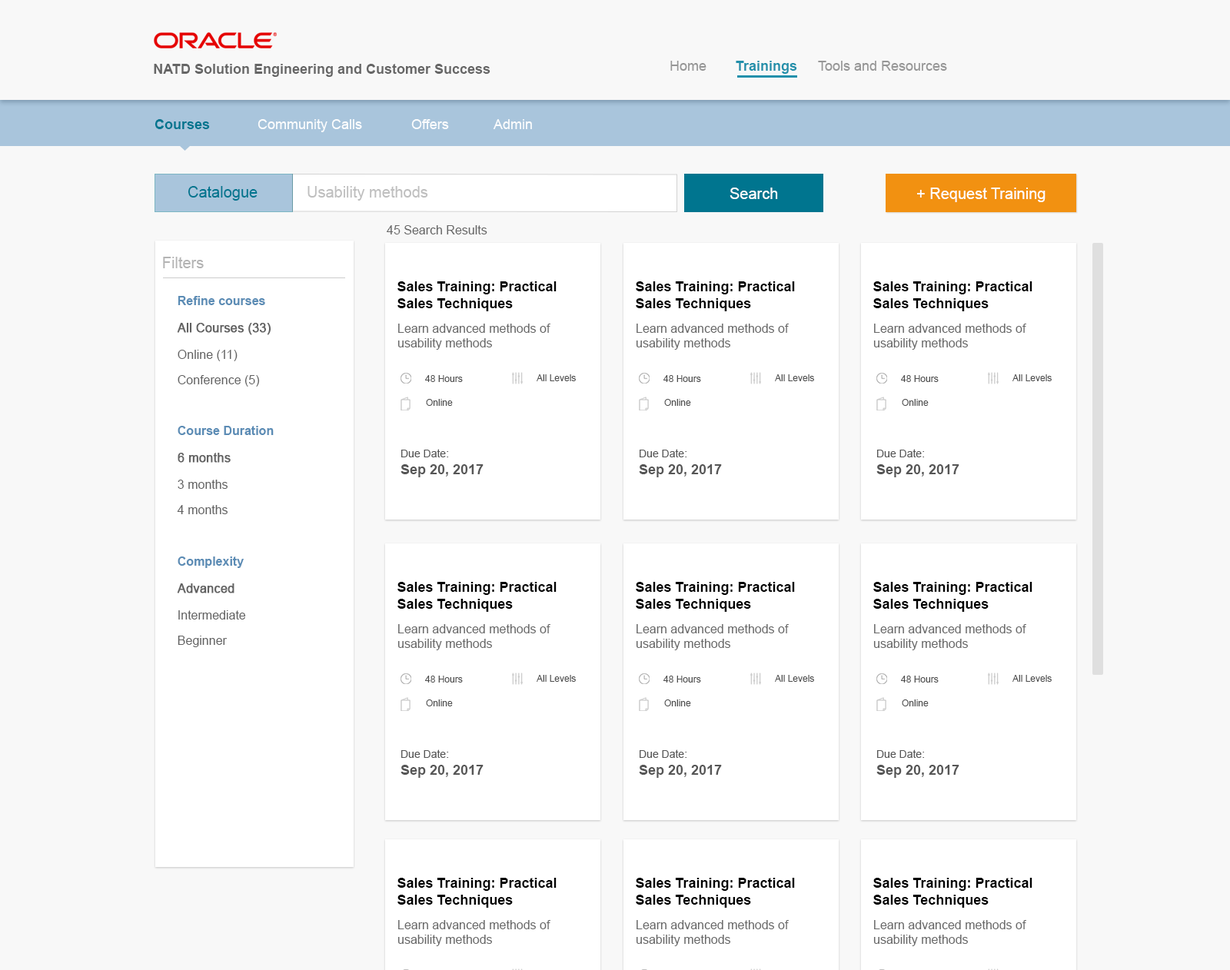
<style>
.page{position:relative;width:1230px;height:970px;background:#ffffff}
.page>*{position:absolute;margin:0}
.t1{font:13.8px "Arial-BoldMT";color:#666666}
.t2{font:13.8px "ArialMT";color:#969696}
.t3{font:13.8px "Arial-BoldMT";color:#2290ab}
.t4{font:13.8px "Arial-BoldMT";color:#00758f}
.t5{font:13.8px "ArialMT";color:#ffffff}
.t6{font:15.4px "ArialMT";color:#00758f}
.t7{font:15.4px "ArialMT";color:#bfbfbf}
.t8{font:15.4px "ArialMT";color:#ffffff}
.t9{font:12.3px "ArialMT";color:#676767}
.t10{font:15.4px "ArialMT";color:#b4b4b4}
.t11{font:13.8px "Arial-BoldMT";color:#000000}
.t12{font:12.3px "Arial-BoldMT";color:#5b8cb5}
.t13{font:12.3px "ArialMT";color:#626262;font-weight:bold}
.t14{font:12.3px "ArialMT";color:#686868}
.t15{font:12.3px "ArialMT";color:#626262}
.t16{font:9.2px "ArialMT";color:#505050}
.t17{font:13.8px "Arial-BoldMT";color:#565656}
.t18{font:10.8px "ArialMT";color:#565656}
</style>
<div class="page">
<p class="t1" style="left:154px;top:64px;width:336px;height:13px">NATD Solution Engineering and Customer Success</p>
<p class="t2" style="left:670px;top:61px;width:36px;height:10px">Home</p>
<p class="t3" style="left:735px;top:61px;width:62px;height:13px">Trainings</p>
<p class="t2" style="left:818px;top:61px;width:129px;height:10px">Tools and Resources</p>
<p class="t4" style="left:154px;top:119px;width:56px;height:10px">Courses</p>
<p class="t5" style="left:257px;top:119px;width:105px;height:13px;opacity:0.95">Community Calls</p>
<p class="t5" style="left:411px;top:119px;width:38px;height:10px;opacity:0.95">Offers</p>
<p class="t5" style="left:493px;top:119px;width:39px;height:10px;opacity:0.95">Admin</p>
<p class="t6" style="left:188px;top:186px;width:69px;height:15px">Catalogue</p>
<p class="t7" style="left:307px;top:186px;width:121px;height:15px">Usability methods</p>
<p class="t8" style="left:729px;top:188px;width:49px;height:11px">Search</p>
<p class="t8" style="left:917px;top:188px;width:128px;height:14px">+ Request Training</p>
<p class="t9" style="left:387px;top:225px;width:100px;height:9px">45 Search Results</p>
<p class="t10" style="left:163px;top:257px;width:41px;height:11px">Filters</p>
<p class="t11" style="left:397px;top:281px;width:159px;height:30px">Sales Training: Practical Sales Techniques</p>
<p class="t11" style="left:636px;top:281px;width:159px;height:30px">Sales Training: Practical Sales Techniques</p>
<p class="t11" style="left:873px;top:281px;width:159px;height:30px">Sales Training: Practical Sales Techniques</p>
<p class="t12" style="left:178px;top:296px;width:87px;height:9px">Refine courses</p>
<p class="t13" style="left:177px;top:323px;width:94px;height:12px">All Courses (33)</p>
<p class="t14" style="left:397px;top:324px;width:153px;height:26px">Learn advanced methods of<br>usability methods</p>
<p class="t14" style="left:636px;top:324px;width:152px;height:26px">Learn advanced methods of<br>usability methods</p>
<p class="t14" style="left:873px;top:324px;width:153px;height:26px">Learn advanced methods of<br>usability methods</p>
<p class="t15" style="left:178px;top:350px;width:59px;height:11px">Online (11)</p>
<p class="t15" style="left:178px;top:375px;width:82px;height:12px">Conference (5)</p>
<p class="t16" style="left:425px;top:375px;width:38px;height:7px">48 Hours</p>
<p class="t16" style="left:536px;top:374px;width:40px;height:7px">All Levels</p>
<p class="t16" style="left:663px;top:375px;width:38px;height:7px">48 Hours</p>
<p class="t16" style="left:775px;top:374px;width:39px;height:7px">All Levels</p>
<p class="t16" style="left:901px;top:375px;width:37px;height:7px">48 Hours</p>
<p class="t16" style="left:1012px;top:374px;width:39px;height:7px">All Levels</p>
<p class="t16" style="left:426px;top:399px;width:27px;height:7px">Online</p>
<p class="t16" style="left:664px;top:399px;width:27px;height:7px">Online</p>
<p class="t16" style="left:901px;top:399px;width:27px;height:7px">Online</p>
<p class="t12" style="left:178px;top:426px;width:96px;height:9px">Course Duration</p>
<p class="t17" style="left:400px;top:449px;width:83px;height:28px"><span class="t18">Due Date: <br></span>Sep 20, 2017</p>
<p class="t17" style="left:639px;top:449px;width:83px;height:28px"><span class="t18">Due Date: <br></span>Sep 20, 2017</p>
<p class="t17" style="left:876px;top:449px;width:83px;height:28px"><span class="t18">Due Date: <br></span>Sep 20, 2017</p>
<p class="t13" style="left:178px;top:453px;width:53px;height:10px">6 months</p>
<p class="t15" style="left:178px;top:480px;width:49px;height:9px">3 months</p>
<p class="t15" style="left:177px;top:505px;width:50px;height:9px">4 months</p>
<p class="t12" style="left:178px;top:556px;width:66px;height:12px">Complexity</p>
<p class="t11" style="left:397px;top:582px;width:159px;height:30px">Sales Training: Practical Sales Techniques</p>
<p class="t11" style="left:636px;top:582px;width:159px;height:30px">Sales Training: Practical Sales Techniques</p>
<p class="t11" style="left:873px;top:582px;width:159px;height:30px">Sales Training: Practical Sales Techniques</p>
<p class="t13" style="left:177px;top:583px;width:57px;height:10px">Advanced</p>
<p class="t15" style="left:178px;top:610px;width:68px;height:9px">Intermediate</p>
<p class="t14" style="left:397px;top:624px;width:153px;height:26px">Learn advanced methods of<br>usability methods</p>
<p class="t14" style="left:636px;top:624px;width:152px;height:26px">Learn advanced methods of<br>usability methods</p>
<p class="t14" style="left:873px;top:624px;width:153px;height:26px">Learn advanced methods of<br>usability methods</p>
<p class="t15" style="left:178px;top:636px;width:49px;height:11px">Beginner</p>
<p class="t16" style="left:425px;top:675px;width:38px;height:7px">48 Hours</p>
<p class="t16" style="left:536px;top:675px;width:40px;height:7px">All Levels</p>
<p class="t16" style="left:663px;top:675px;width:38px;height:7px">48 Hours</p>
<p class="t16" style="left:775px;top:675px;width:39px;height:7px">All Levels</p>
<p class="t16" style="left:901px;top:675px;width:37px;height:7px">48 Hours</p>
<p class="t16" style="left:1012px;top:675px;width:39px;height:7px">All Levels</p>
<p class="t16" style="left:426px;top:699px;width:27px;height:7px">Online</p>
<p class="t16" style="left:664px;top:699px;width:27px;height:7px">Online</p>
<p class="t16" style="left:901px;top:699px;width:27px;height:7px">Online</p>
<p class="t17" style="left:400px;top:749px;width:83px;height:29px"><span class="t18">Due Date: <br></span>Sep 20, 2017</p>
<p class="t17" style="left:639px;top:749px;width:83px;height:29px"><span class="t18">Due Date: <br></span>Sep 20, 2017</p>
<p class="t17" style="left:876px;top:749px;width:83px;height:29px"><span class="t18">Due Date: <br></span>Sep 20, 2017</p>
<p class="t11" style="left:397px;top:878px;width:159px;height:30px">Sales Training: Practical Sales Techniques</p>
<p class="t11" style="left:636px;top:878px;width:159px;height:30px">Sales Training: Practical Sales Techniques</p>
<p class="t11" style="left:873px;top:878px;width:159px;height:30px">Sales Training: Practical Sales Techniques</p>
<p class="t14" style="left:397px;top:920px;width:153px;height:26px">Learn advanced methods of<br>usability methods</p>
<p class="t14" style="left:636px;top:920px;width:152px;height:26px">Learn advanced methods of<br>usability methods</p>
<p class="t14" style="left:873px;top:920px;width:153px;height:26px">Learn advanced methods of<br>usability methods</p>
</div>
